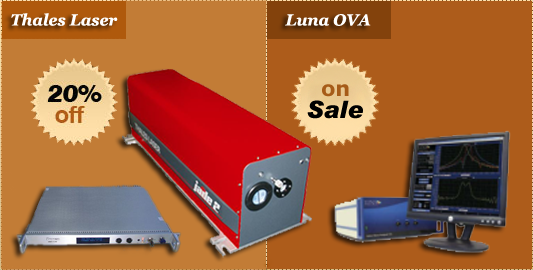
<style>
.page{position:relative;width:533px;height:270px;background:#ad5c1b}
.page>*{position:absolute;margin:0}
.t1{font:16px "Georgia-BoldItalic";color:#ffffff}
.t2{font:21px "Verdana-Bold";letter-spacing:-0.01em;color:#a65b18}
.t3{font:24px "Arial-BlackItalic";color:#000000}
</style>
<div class="page">
<p class="t1" style="left:11px;top:13px;width:107px;height:13px">Thales Laser</p>
<p class="t1" style="left:285px;top:14px;width:86px;height:12px">Luna OVA</p>
<p class="t2" style="left:322px;top:84px;width:27px;height:13px">on</p>
<p class="t3" style="left:307px;top:100px;width:56px;height:19px">Sale</p>
</div>
